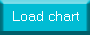
<style>
.page{position:relative;width:90px;height:35px;background:#00bcd4}
.page>*{position:absolute;margin:0}
.t1{font:14px "MicrosoftSansSerif";color:#ffffff}
</style>
<div class="page">
<p class="t1" style="left:13px;top:11px;width:66px;height:10px">Load chart</p>
</div>
